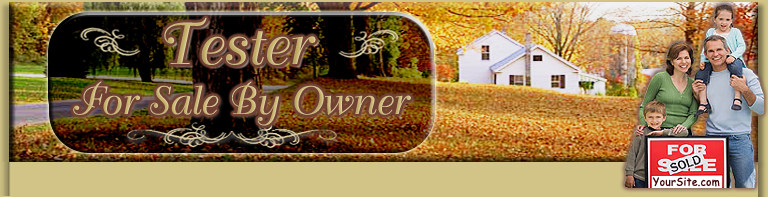
<style>
.page{position:relative;width:768px;height:197px}
.page>*{position:absolute;margin:0}
.t1{font:58.3px "Duchess-";letter-spacing:0.005em;color:#c7b269}
.t2{font:38.9px "Duchess-";letter-spacing:0.005em;color:#c7b269}
.t3{font:11.1px "ComicSansMS";letter-spacing:0.025em;color:#410707;scale:0.93 1}
</style>
<div class="page">
<p class="t1" style="left:164px;top:17px;width:152px;height:48px">Tester</p>
<p class="t2" style="left:73px;top:81px;width:338px;height:45px">For Sale By Owner</p>
<p class="t3" style="left:652px;top:177px;width:68px;height:10px">YourSite.com</p>
</div>
